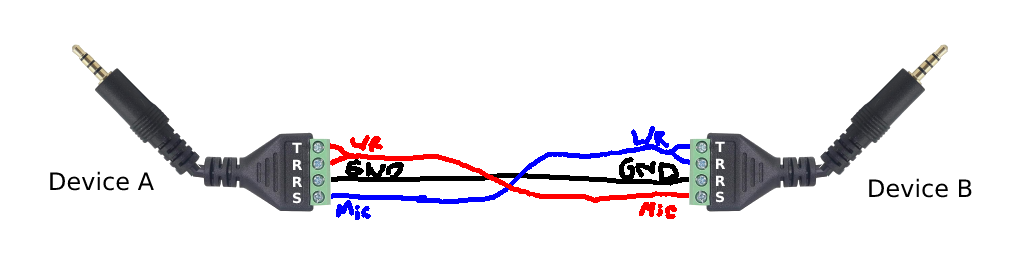
<style>
.page{position:relative;width:1024px;height:256px;background:#ffffff}
.page>*{position:absolute;margin:0}
.t1{font:14px "DejaVuSans-Bold";color:#ffffff}
.t2{font:24px "DejaVuSans";color:#000000}
</style>
<div class="page">
<p class="t1" style="left:292px;top:142px;width:11px;height:62px;text-align:center">T<br>R<br>R<br>S</p>
<p class="t1" style="left:715px;top:141px;width:11px;height:62px;text-align:center">T<br>R<br>R<br>S</p>
<p class="t2" style="left:50px;top:171px;width:104px;height:20px">Device A</p>
<p class="t2" style="left:869px;top:178px;width:103px;height:20px">Device B</p>
</div>
